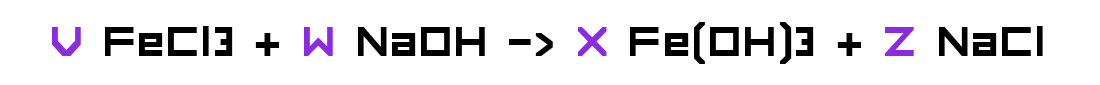
<style>
.page{position:relative;width:1100px;height:85px;background:#ffffff}
.page>*{position:absolute;margin:0}
.t1{font:55px "FORCED-SQUARE";color:#000000}
.t2{font:55px "FORCED-SQUARE";color:#8a2be2}
</style>
<div class="page">
<p class="t1" style="left:52px;top:22px;width:991px;height:42px"><span class="t2">V</span> FeCl3 + <span class="t2">W </span>NaOH -&gt; <span class="t2">X</span> Fe(OH)3 + <span class="t2">Z </span>NaCl</p>
</div>
